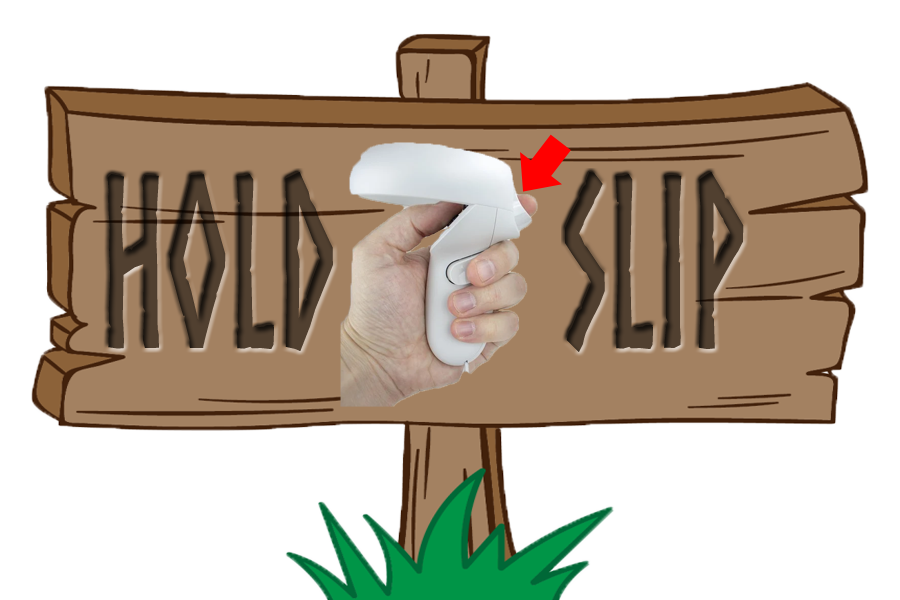
<style>
.page{position:relative;width:900px;height:600px;background:#ffffff}
.page>*{position:absolute;margin:0}
.t1{font:235.3px "Norse-Bold";color:#4f3e2f;scale:0.62 1}
</style>
<div class="page">
<p class="t1" style="left:107px;top:172px;width:226px;height:179px">Hold</p>
<p class="t1" style="left:565px;top:172px;width:179px;height:180px">Slip</p>
</div>
